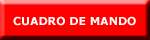
<style>
.page{position:relative;width:150px;height:40px;background:#ff0000}
.page>*{position:absolute;margin:0}
.t1{font:11px "Verdana-Bold";color:#ffffff}
</style>
<div class="page">
<p class="t1" style="left:13px;top:16px;width:123px;height:10px">CUADRO DE MANDO</p>
</div>
